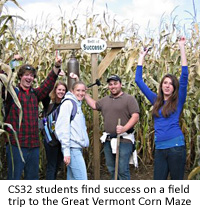
<style>
.page{position:relative;width:200px;height:210px}
.page>*{position:absolute;margin:0}
.t1{font:12px/12px "Calibri";letter-spacing:0.01em;color:#000000}
</style>
<div class="page">
<p class="t1" style="left:8px;top:184px;width:183px;height:23px">CS32 students find success on a field <br>trip to the Great Vermont Corn Maze</p>
</div>
